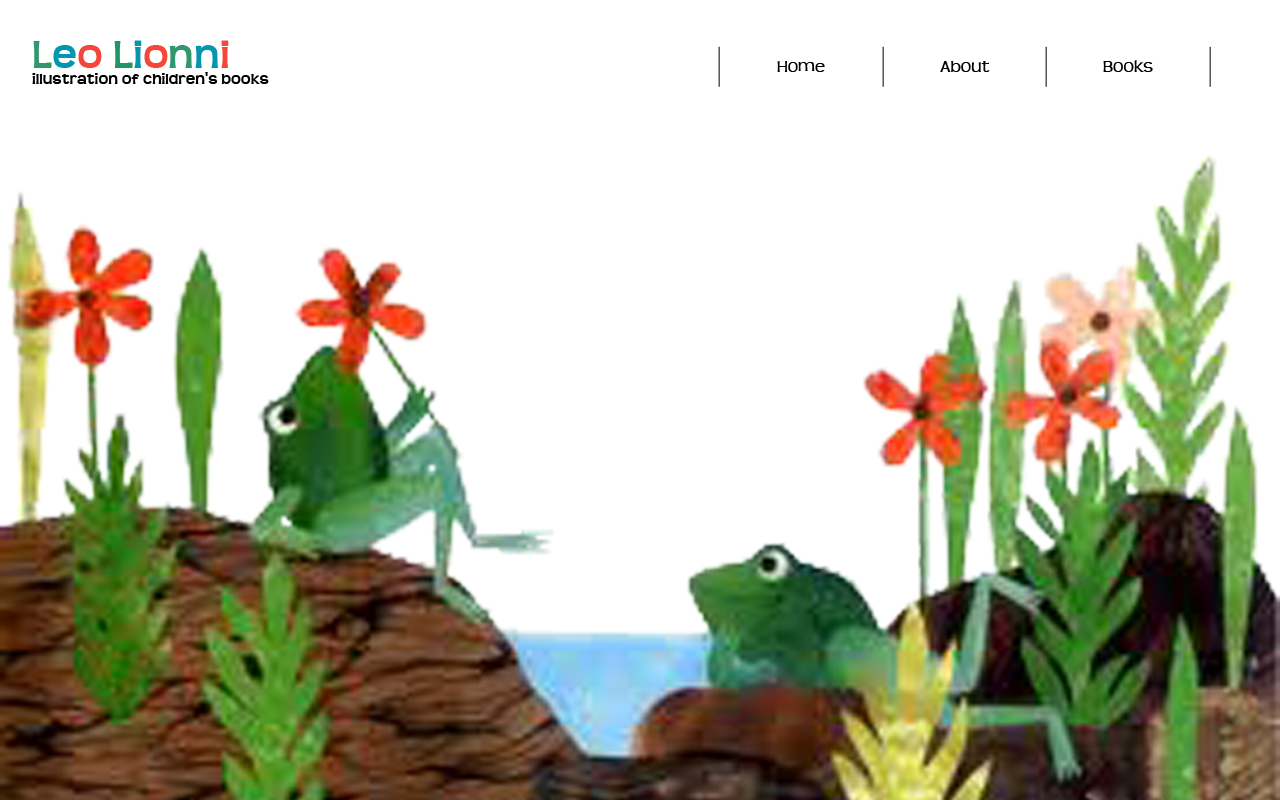
<style>
.page{position:relative;width:1280px;height:800px;background:#ffffff}
.page>*{position:absolute;margin:0}
.t1{font:16px/16px "Teen-Bold";color:#000000}
.t2{font:42px/36px "Teen-Bold";color:#32966e}
.t3{font:42px/36px "Teen-Bold";color:#0596af}
.t4{font:42px/36px "Teen-Bold";color:#f5463c}
.t5{font:42px/36px "Teen-Bold";color:#1f9666}
.t6{font:18px "Teen";color:#000000}
</style>
<div class="page">
<p class="t1" style="left:32px;top:40px;width:237px;height:44px"><span class="t2">L</span><span class="t3">e</span><span class="t4">o </span><span class="t5">L</span><span class="t3">i</span><span class="t4">o</span><span class="t2">n</span><span class="t3">n</span><span class="t4">i<br></span>illustration of children's books</p>
<p class="t6" style="left:777px;top:61px;width:48px;height:11px">Home</p>
<p class="t6" style="left:940px;top:61px;width:50px;height:11px">About</p>
<p class="t6" style="left:1103px;top:60px;width:50px;height:12px">Books</p>
</div>
